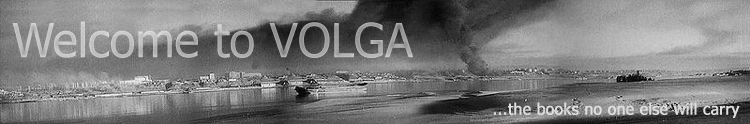
<style>
.page{position:relative;width:750px;height:124px}
.page>*{position:absolute;margin:0}
.t1{font:47px "Tahoma"}
.t2{font:15.7px "Tahoma";color:#dfdfdf;font-weight:bold}
</style>
<div class="page">
<p class="t1" style="left:12px;top:21px;width:402px;height:37px">Welcome to VOLGA</p>
<p class="t2" style="left:493px;top:102px;width:247px;height:16px">...the books no one else will carry</p>
</div>
